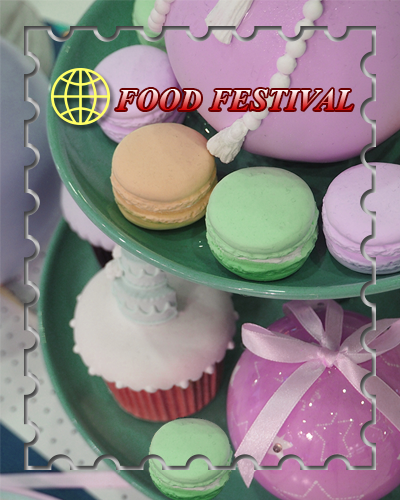
<style>
.page{position:relative;width:400px;height:500px}
.page>*{position:absolute;margin:0}
.t1{font:30.2px "TimesNewRomanPS-BoldItalicMT"}
</style>
<div class="page">
<p class="t1" style="left:116px;top:89px;width:237px;height:21px">FOOD FESTIVAL</p>
</div>
